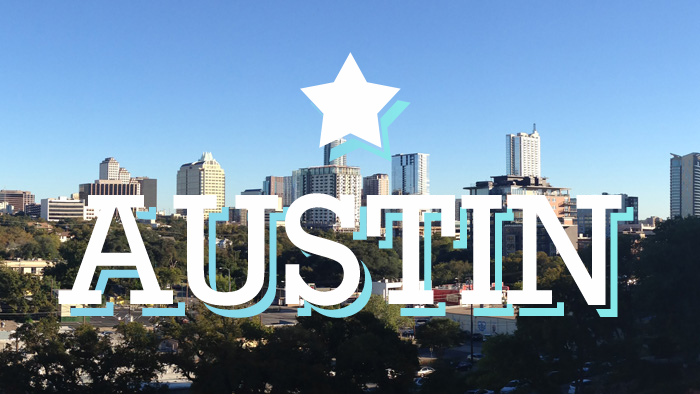
<style>
.page{position:relative;width:700px;height:394px}
.page>*{position:absolute;margin:0}
.t1{font:160px "Rockwell";color:#fffeff}
</style>
<div class="page">
<p class="t1" style="left:58px;top:193px;width:564px;height:113px">AUSTIN</p>
</div>
